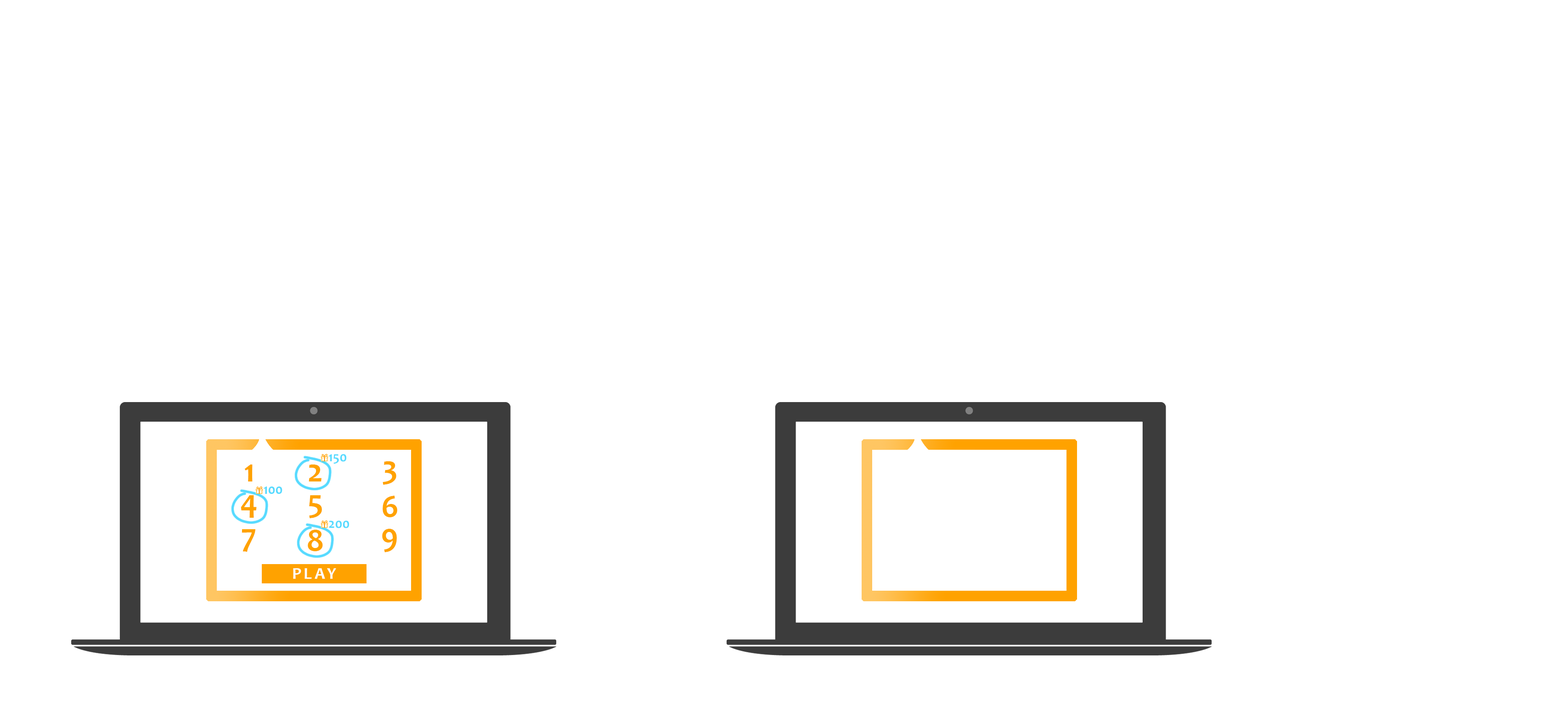
<style>
.page{position:relative;width:1568px;height:705px;background:#ffffff}
.page>*{position:absolute;margin:0}
.t1{font:13.7px "Candara-Bold";color:#56daff}
.t2{font:33.1px "Candara-Bold";color:#ffa200}
.t3{font:13.8px "Candara-Bold";color:#56daff}
.t4{font:16.5px "Candara-Bold";letter-spacing:0.16em;color:#ffffff}
</style>
<div class="page">
<p class="t1" style="left:328px;top:454px;width:18px;height:10px">150</p>
<p class="t2" style="left:383px;top:462px;width:13px;height:23px">3</p>
<p class="t2" style="left:244px;top:465px;width:9px;height:17px">1</p>
<p class="t2" style="left:309px;top:465px;width:12px;height:17px">2</p>
<p class="t2" style="left:241px;top:496px;width:16px;height:22px">4</p>
<p class="t3" style="left:264px;top:487px;width:18px;height:7px">100</p>
<p class="t2" style="left:309px;top:496px;width:13px;height:23px">5</p>
<p class="t2" style="left:383px;top:496px;width:14px;height:22px">6</p>
<p class="t1" style="left:329px;top:521px;width:20px;height:8px">200</p>
<p class="t2" style="left:242px;top:530px;width:13px;height:22px">7</p>
<p class="t2" style="left:308px;top:530px;width:15px;height:22px">8</p>
<p class="t2" style="left:382px;top:529px;width:15px;height:24px">9</p>
<p class="t4" style="left:293px;top:569px;width:43px;height:10px">PLAY</p>
</div>
